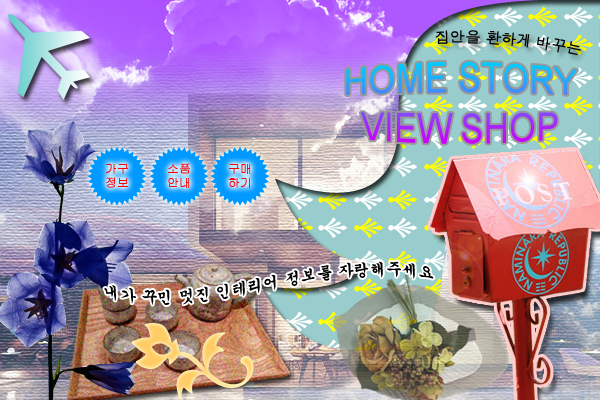
<style>
.page{position:relative;width:600px;height:400px}
.page>*{position:absolute;margin:0}
.t1{font:15px "Dotum";color:#000000}
.t2{font:35px "ArialMT"}
.t3{font:12px "Gulim";color:#ff0000}
.t4{font:16px "Gungsuh";color:#000000}
</style>
<div class="page">
<p class="t1" style="left:435px;top:30px;width:146px;height:26px;rotate:5deg">집안을 환하게 바꾸는</p>
<p class="t2" style="left:346px;top:61px;width:231px;height:83px;text-align:center">HOME STORY<br>VIEW SHOP</p>
<p class="t3" style="left:106px;top:164px;width:22px;height:24px;text-align:center">가구<br>정보</p>
<p class="t3" style="left:168px;top:163px;width:23px;height:25px;text-align:center">소품<br>안내</p>
<p class="t3" style="left:229px;top:164px;width:22px;height:24px;text-align:center">구매<br>하기</p>
<p class="t4" style="left:104px;top:261px;width:330px;height:44px;rotate:-3deg">내가 꾸민 멋진 인테리어 정보를 자랑해주세요</p>
</div>
